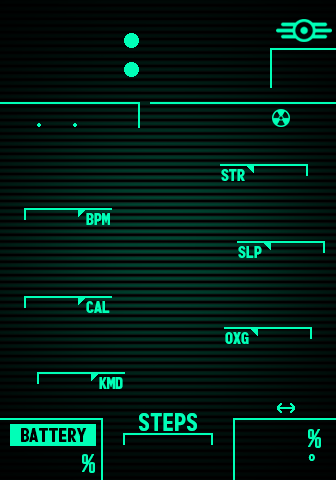
<style>
.page{position:relative;width:336px;height:480px;background:#000000}
.page>*{position:absolute;margin:0}
.t1{font:16px "Monofonto-Regular";color:#00ffb7}
.t2{font:24px "Monofonto-Regular";color:#00ffb7}
.t3{font:18.7px "Monofonto-Regular";color:#000000}
.t4{font:13.3px "Monofonto-Regular";color:#00ffb7}
</style>
<div class="page">
<p class="t1" style="left:221px;top:169px;width:24px;height:12px">STR</p>
<p class="t1" style="left:86px;top:213px;width:24px;height:12px">BPM</p>
<p class="t1" style="left:238px;top:246px;width:24px;height:12px">SLP</p>
<p class="t1" style="left:86px;top:301px;width:24px;height:12px">CAL</p>
<p class="t1" style="left:225px;top:332px;width:24px;height:12px">OXG</p>
<p class="t1" style="left:99px;top:377px;width:24px;height:12px">KMD</p>
<p class="t2" style="left:139px;top:413px;width:58px;height:18px">STEPS</p>
<p class="t3" style="left:21px;top:428px;width:66px;height:14px">BATTERY</p>
<p class="t2" style="left:308px;top:429px;width:13px;height:19px">%</p>
<p class="t2" style="left:82px;top:454px;width:13px;height:19px">%</p>
<p class="t4" style="left:308px;top:454px;width:7px;height:7px">o</p>
</div>
